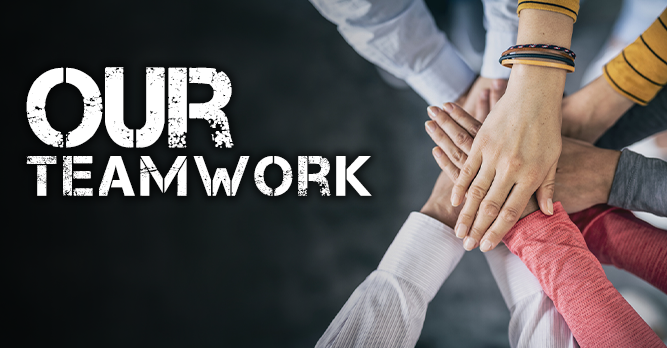
<style>
.page{position:relative;width:667px;height:348px}
.page>*{position:absolute;margin:0}
.t1{font:113.3px "Captureit";color:#ffffff}
.t2{font:56.8px "Captureit";letter-spacing:0.08em;color:#ffffff}
</style>
<div class="page">
<p class="t1" style="left:26px;top:67px;width:208px;height:81px">our</p>
<p class="t2" style="left:26px;top:156px;width:346px;height:40px">Teamwork</p>
</div>
